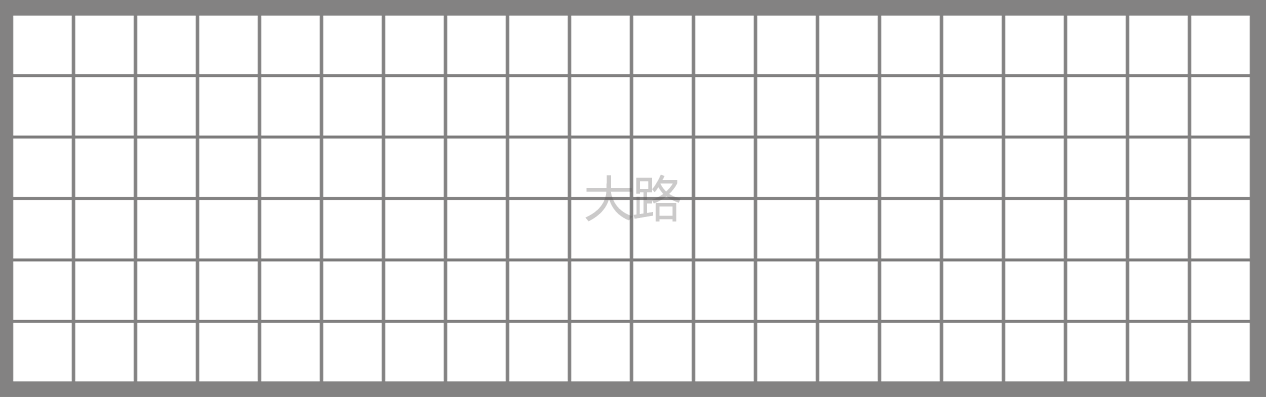
<style>
.page{position:relative;width:1266px;height:397px;background:#ffffff}
.page>*{position:absolute;margin:0}
.t1{font:48px "MicrosoftYaHei";color:#cbcaca}
</style>
<div class="page">
<p class="t1" style="left:585px;top:174px;width:96px;height:48px">大路</p>
</div>
